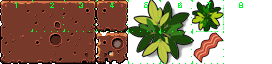
<style>
.page{position:relative;width:272px;height:64px;background:#773a2a}
.page>*{position:absolute;margin:0}
.t1{font:8px "HelveticaNeue-Thin";color:#00ff2a}
</style>
<div class="page">
<p class="t1" style="left:15px;top:2px;width:228px;height:6px">1 2           3            4           5          6       7     8</p>
</div>
